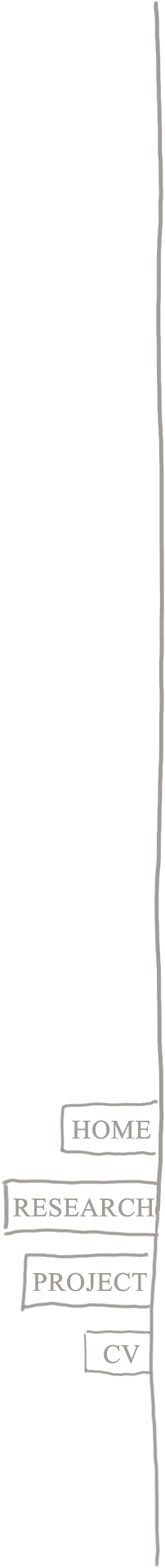
<style>
.page{position:relative;width:165px;height:1568px;background:#ffffff}
.page>*{position:absolute;margin:0}
.t1{font:39.3px "Microsoft-Himalaya";letter-spacing:-0.01em;color:#a49e9a;font-weight:bold}
</style>
<div class="page">
<p class="t1" style="left:72px;top:1120px;width:80px;height:20px">HOME</p>
<p class="t1" style="left:13px;top:1198px;width:142px;height:19px">RESEARCH</p>
<p class="t1" style="left:33px;top:1272px;width:114px;height:20px">PROJECT</p>
<p class="t1" style="left:104px;top:1344px;width:37px;height:20px">CV</p>
</div>
